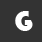
<style>
.page{position:relative;width:42px;height:42px;background:#333333}
.page>*{position:absolute;margin:0}
.t1{font:30px "Bauhaus93";color:#ffffff}
</style>
<div class="page">
<p class="t1" style="left:15px;top:11px;width:18px;height:20px">G</p>
</div>
